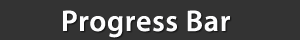
<style>
.page{position:relative;width:300px;height:40px;background:#333333}
.page>*{position:absolute;margin:0}
.t1{font:30px "MyriadPro-Semibold";letter-spacing:0.025em;color:#fdfdfe}
</style>
<div class="page">
<p class="t1" style="left:63px;top:10px;width:167px;height:28px">Progress Bar</p>
</div>
